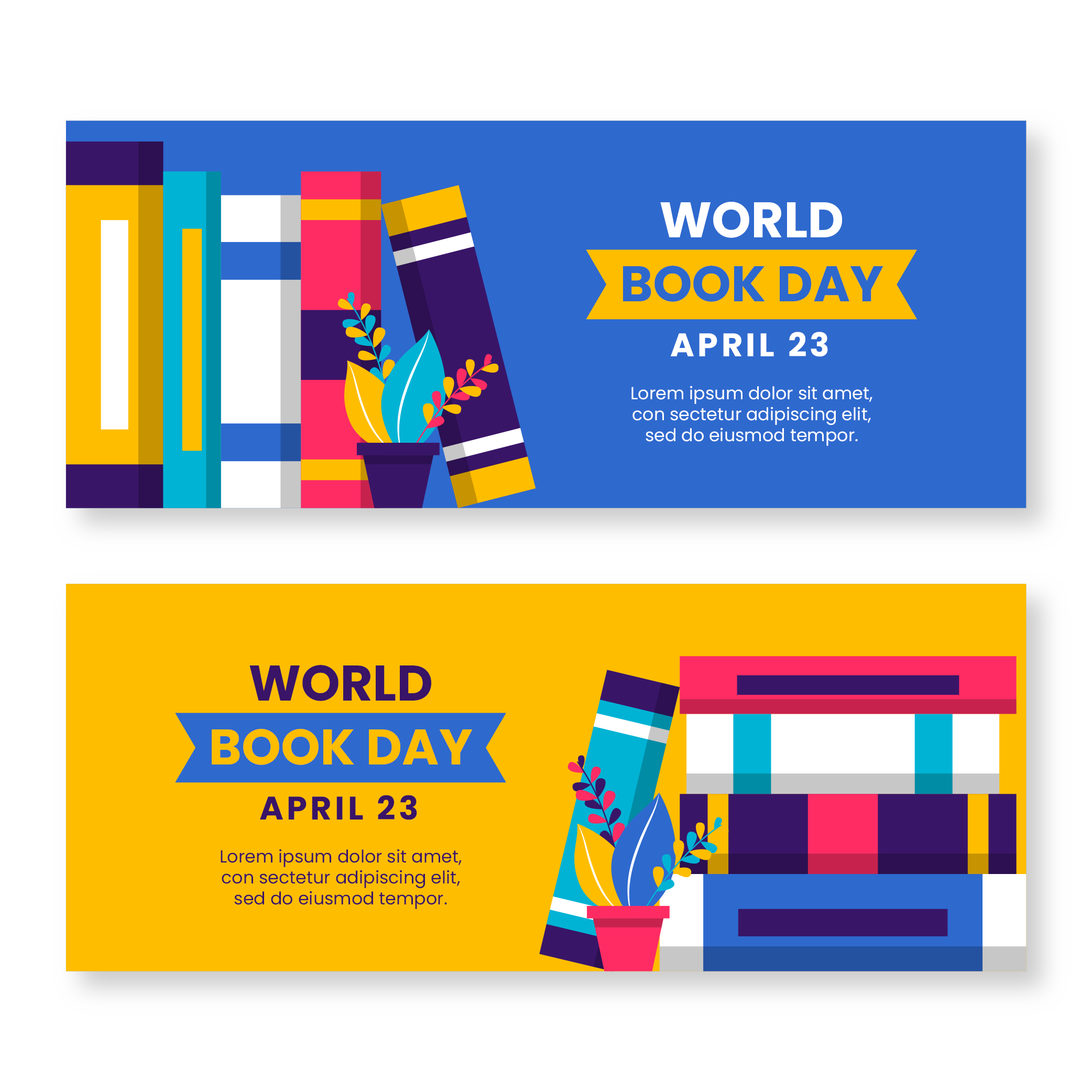
<style>
.page{position:relative;width:1092px;height:1092px;background:#ffffff}
.page>*{position:absolute;margin:0}
.t1{font:50px "Poppins-Bold";color:#ffffff}
.t2{font:50px "Poppins-Bold";color:#2e69ce}
.t3{font:32.7px "Poppins-Bold";letter-spacing:0.1em;color:#ffffff}
.t4{font:17.5px "Poppins-Regular";color:#ffffff}
.t5{font:50px "Poppins-Bold";color:#391568}
.t6{font:50px "Poppins-Bold";color:#ffbd00}
.t7{font:32.7px "Poppins-Bold";letter-spacing:0.1em;color:#391568}
.t8{font:17.5px "Poppins-Regular";color:#391568}
</style>
<div class="page">
<p class="t1" style="left:660px;top:202px;width:182px;height:36px">WORLD</p>
<p class="t2" style="left:623px;top:266px;width:260px;height:36px">BOOK DAY</p>
<p class="t3" style="left:671px;top:332px;width:157px;height:25px">APRIL 23</p>
<p class="t4" style="left:631px;top:386px;width:241px;height:60px;text-align:center">Lorem ipsum dolor sit amet,<br>con sectetur adipiscing elit,<br>sed do eiusmod tempor.</p>
<p class="t5" style="left:249px;top:665px;width:182px;height:36px">WORLD</p>
<p class="t6" style="left:212px;top:729px;width:261px;height:36px">BOOK DAY</p>
<p class="t7" style="left:260px;top:795px;width:157px;height:25px">APRIL 23</p>
<p class="t8" style="left:221px;top:849px;width:241px;height:60px;text-align:center">Lorem ipsum dolor sit amet,<br>con sectetur adipiscing elit,<br>sed do eiusmod tempor.</p>
</div>
